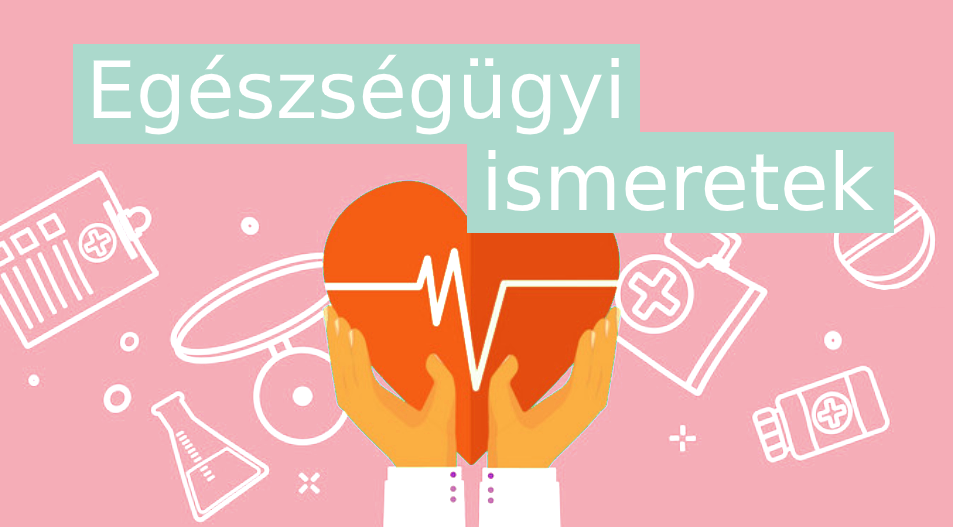
<style>
.page{position:relative;width:953px;height:527px;background:#f5adb7}
.page>*{position:absolute;margin:0}
.t1{font:79px "DejaVuSans";color:#ffffff}
</style>
<div class="page">
<p class="t1" style="left:93px;top:54px;width:526px;height:81px">Egészségügyi</p>
<p class="t1" style="left:488px;top:149px;width:387px;height:63px">ismeretek</p>
</div>
